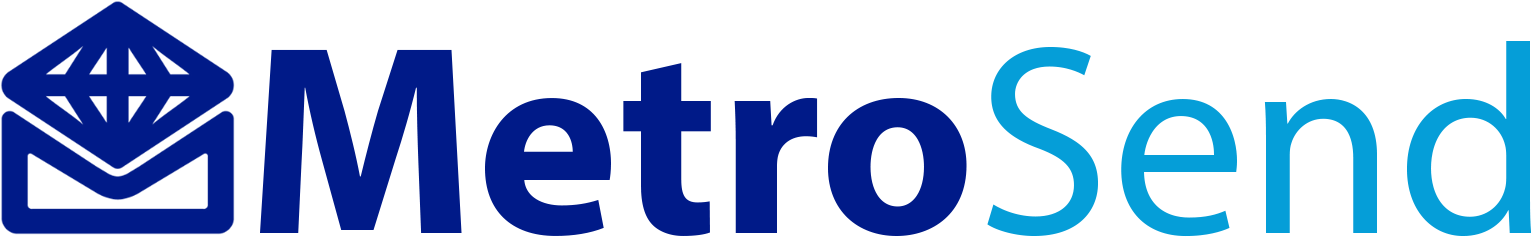
<style>
.page{position:relative;width:1531px;height:237px;background:#ffffff}
.page>*{position:absolute;margin:0}
.t1{font:270.8px "MyriadPro-Bold";color:#001a88}
.t2{font:270.8px "MyriadPro-Regular";color:#059ed8}
</style>
<div class="page">
<p class="t1" style="left:260px;top:41px;width:1272px;height:196px">Metro<span class="t2">Send</span></p>
</div>
